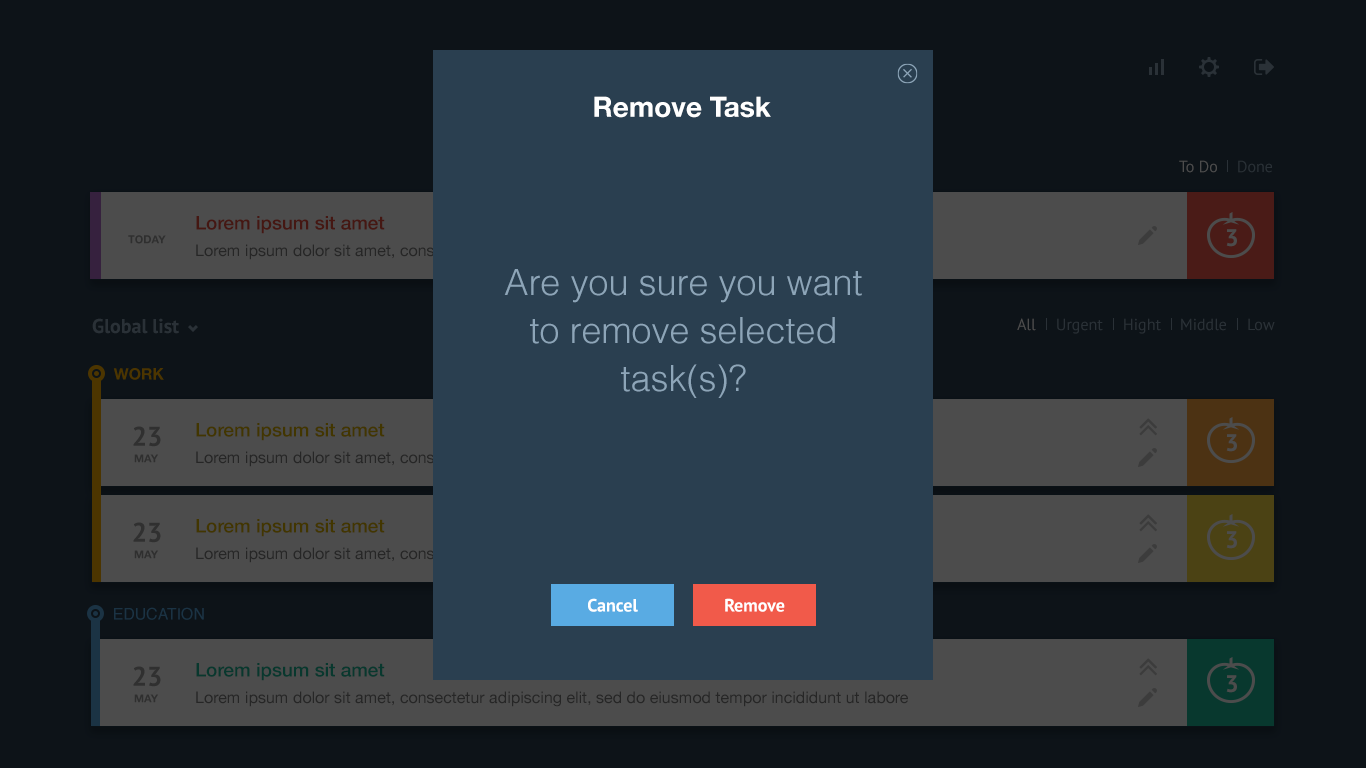
<style>
.page{position:relative;width:1366px;height:768px;background:#0d1318}
.page>*{position:absolute;margin:0}
.t1{font:28px "HelveticaNeue-Bold";color:#ffffff}
.t2{font:16px "PTSans-Regular";color:#4c4c4c}
.t3{font:16px "PTSans-Regular";color:#293036}
.t4{font:19px "HelveticaNeue-Medium";color:#451712}
.t5{font:24px "PTSans-Bold";color:#4c4c4c}
.t6{font:11px "HelveticaNeue-Bold";color:#2f2f2f}
.t7{font:16px "HelveticaNeue"}
.t8{font:36px/48px "Helvetica-Light";color:#8da5b8}
.t9{font:20px "PTSans-Bold";color:#2a3137}
.t10{font:16px "PTSans-Regular";color:#2a3137}
.t11{font:15.8px "HelveticaNeueBold";color:#4c3500}
.t12{font:19px "HelveticaNeue-Medium";color:#423600}
.t13{font:27px "PTSans-Bold";color:#303030}
.t14{font:18px "PTSans-Bold";color:#ffffff}
.t15{font:15.8px "Helvetica";color:#1b3344}
.t16{font:19px "HelveticaNeue-Medium";color:#08382e}
.t17{font:16px "HelveticaNeue";color:#262626}
</style>
<div class="page">
<p class="t1" style="left:594px;top:96px;width:177px;height:22px">Remove Task</p>
<p class="t2" style="left:1179px;top:160px;width:38px;height:13px">To Do</p>
<p class="t3" style="left:1238px;top:160px;width:34px;height:13px">Done</p>
<p class="t4" style="left:196px;top:216px;width:189px;height:18px">Lorem ipsum sit amet</p>
<p class="t5" style="left:1226px;top:229px;width:11px;height:18px">3</p>
<p class="t6" style="left:128px;top:235px;width:38px;height:9px">TODAY</p>
<p class="t7" style="left:196px;top:244px;width:712px;height:16px">Lorem ipsum dolor sit amet, consectetur adipiscing elit, sed do eiusmod tempor incididunt ut labore</p>
<p class="t8" style="left:504px;top:269px;width:358px;height:129px;text-align:center">Are you sure you want to remove selected task(s)?</p>
<p class="t9" style="left:92px;top:318px;width:87px;height:16px">Global list</p>
<p class="t2" style="left:1017px;top:318px;width:19px;height:13px">All</p>
<p class="t10" style="left:1057px;top:318px;width:46px;height:16px">Urgent</p>
<p class="t10" style="left:1124px;top:318px;width:37px;height:16px">Hight</p>
<p class="t10" style="left:1181px;top:318px;width:45px;height:13px">Middle</p>
<p class="t10" style="left:1248px;top:318px;width:27px;height:13px">Low</p>
<p class="t11" style="left:113px;top:368px;width:51px;height:12px">WORK</p>
<p class="t12" style="left:196px;top:423px;width:189px;height:18px">Lorem ipsum sit amet</p>
<p class="t13" style="left:133px;top:426px;width:28px;height:21px">23</p>
<p class="t5" style="left:1226px;top:434px;width:11px;height:18px">3</p>
<p class="t6" style="left:134px;top:454px;width:25px;height:9px">MAY</p>
<p class="t7" style="left:196px;top:451px;width:712px;height:16px">Lorem ipsum dolor sit amet, consectetur adipiscing elit, sed do eiusmod tempor incididunt ut labore</p>
<p class="t12" style="left:196px;top:519px;width:189px;height:18px">Lorem ipsum sit amet</p>
<p class="t13" style="left:133px;top:522px;width:28px;height:21px">23</p>
<p class="t5" style="left:1226px;top:531px;width:11px;height:18px">3</p>
<p class="t6" style="left:134px;top:550px;width:25px;height:9px">MAY</p>
<p class="t7" style="left:196px;top:547px;width:712px;height:16px">Lorem ipsum dolor sit amet, consectetur adipiscing elit, sed do eiusmod tempor incididunt ut labore</p>
<p class="t14" style="left:588px;top:598px;width:50px;height:14px">Cancel</p>
<p class="t14" style="left:725px;top:598px;width:60px;height:14px">Remove</p>
<p class="t15" style="left:114px;top:607px;width:90px;height:13px">EDUCATION</p>
<p class="t16" style="left:196px;top:663px;width:189px;height:18px">Lorem ipsum sit amet</p>
<p class="t13" style="left:133px;top:666px;width:28px;height:21px">23</p>
<p class="t5" style="left:1226px;top:675px;width:11px;height:18px">3</p>
<p class="t6" style="left:134px;top:694px;width:25px;height:9px">MAY</p>
<p class="t17" style="left:196px;top:691px;width:712px;height:16px">Lorem ipsum dolor sit amet, consectetur adipiscing elit, sed do eiusmod tempor incididunt ut labore</p>
</div>
